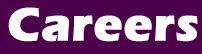
<style>
.page{position:relative;width:202px;height:54px;background:#4b0049}
.page>*{position:absolute;margin:0}
.t1{font:48px "ErasITC-Bold";color:#ffffff;font-weight:bold}
</style>
<div class="page">
<p class="t1" style="left:8px;top:7px;width:190px;height:35px">Careers</p>
</div>
